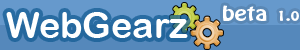
<style>
.page{position:relative;width:300px;height:50px;background:#5588bb}
.page>*{position:absolute;margin:0}
.t1{font:18px "HoboStd";color:#ffffff;scale:1.3 1}
.t2{font:36px "ArialRoundedMTBold";color:#ffffff}
.t3{font:12px "HoboStd";color:#ffffff;scale:1.3 1}
</style>
<div class="page">
<p class="t1" style="left:223px;top:5px;width:44px;height:16px">beta</p>
<p class="t2" style="left:6px;top:12px;width:182px;height:26px">WebGearz</p>
<p class="t3" style="left:279px;top:10px;width:20px;height:11px">1.0</p>
</div>
